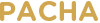
<style>
.page{position:relative;width:100px;height:23px;background:#ffffff}
.page>*{position:absolute;margin:0}
.t1{font:27.4px "GothamRounded-Bold";color:#d1a650}
</style>
<div class="page">
<p class="t1" style="left:0px;top:1px;width:98px;height:20px">PACHA</p>
</div>
